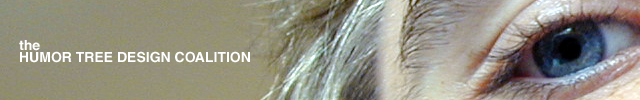
<style>
.page{position:relative;width:640px;height:100px}
.page>*{position:absolute;margin:0}
.t1{font:14px/12px "Helvetica-Bold";color:#ffffff}
</style>
<div class="page">
<p class="t1" style="left:19px;top:40px;width:231px;height:23px">the<br>HUMOR TREE DESIGN COALITION</p>
</div>
